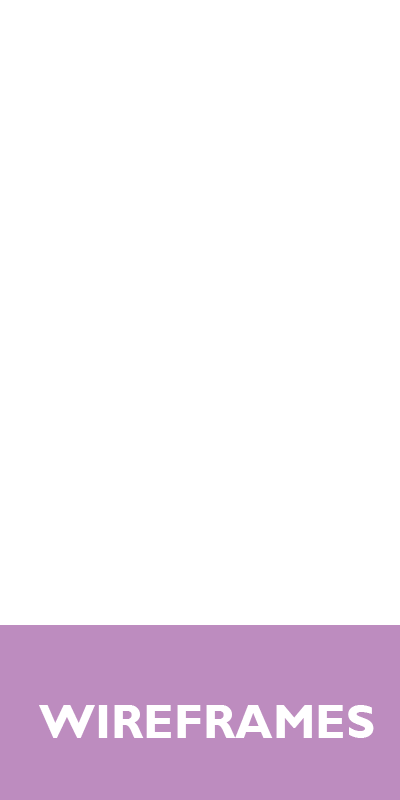
<style>
.page{position:relative;width:400px;height:800px;background:#ffffff}
.page>*{position:absolute;margin:0}
.t1{font:48px "GillSansMT-Bold";color:#ffffff}
</style>
<div class="page">
<p class="t1" style="left:39px;top:705px;width:335px;height:33px">WIREFRAMES</p>
</div>
